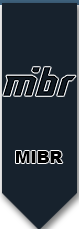
<style>
.page{position:relative;width:79px;height:229px;background:#17222d}
.page>*{position:absolute;margin:0}
.t1{font:16.7px "Arial-Black";letter-spacing:-0.01em;color:#000000}
</style>
<div class="page">
<p class="t1" style="left:16px;top:151px;width:47px;height:12px">MIBR</p>
</div>
